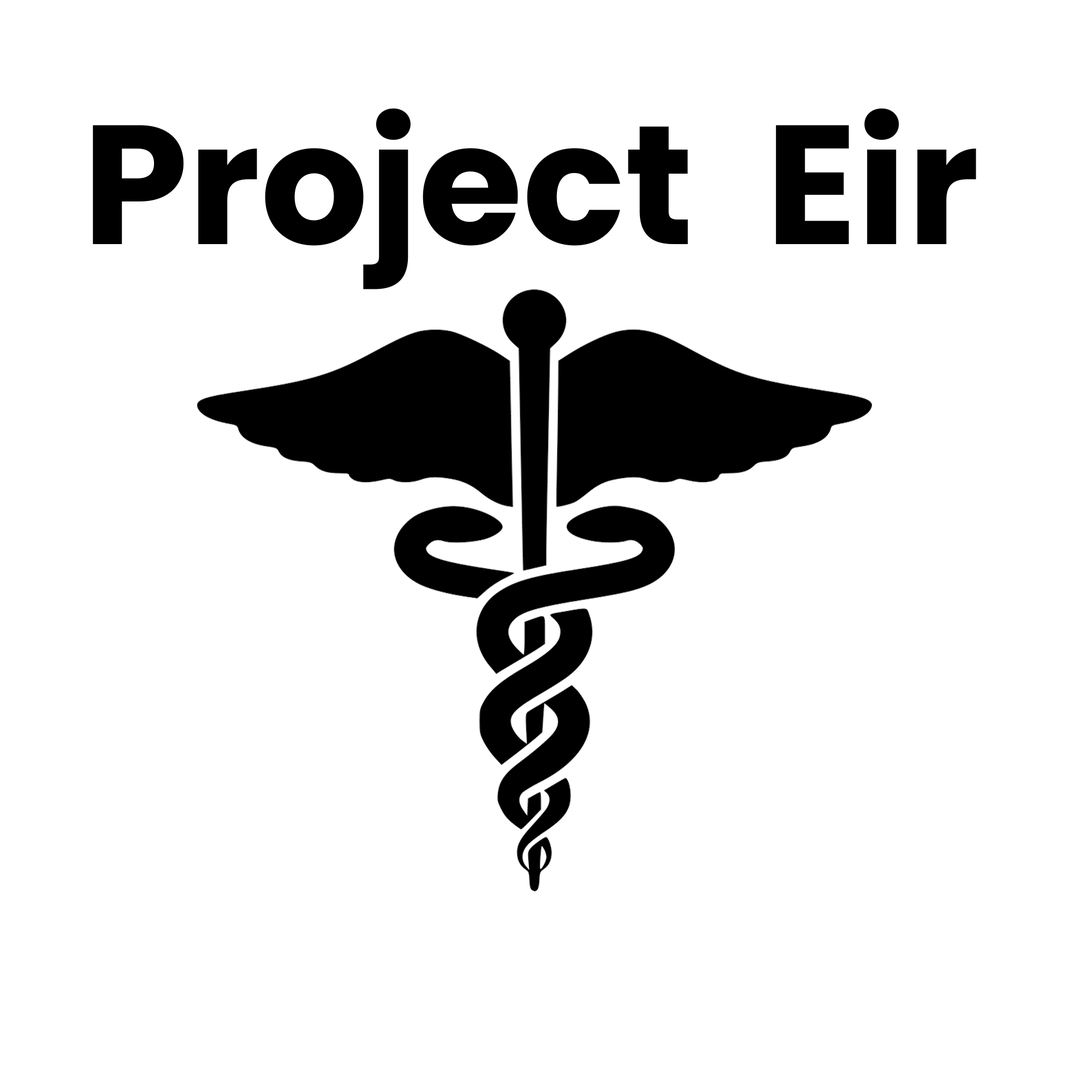
<style>
.page{position:relative;width:1092px;height:1092px;background:#ffffff}
.page>*{position:absolute;margin:0}
.t1{font:169.3px "Poppins-Bold";color:#000000}
</style>
<div class="page">
<p class="t1" style="left:93px;top:108px;width:883px;height:181px">Project  Eir</p>
</div>
